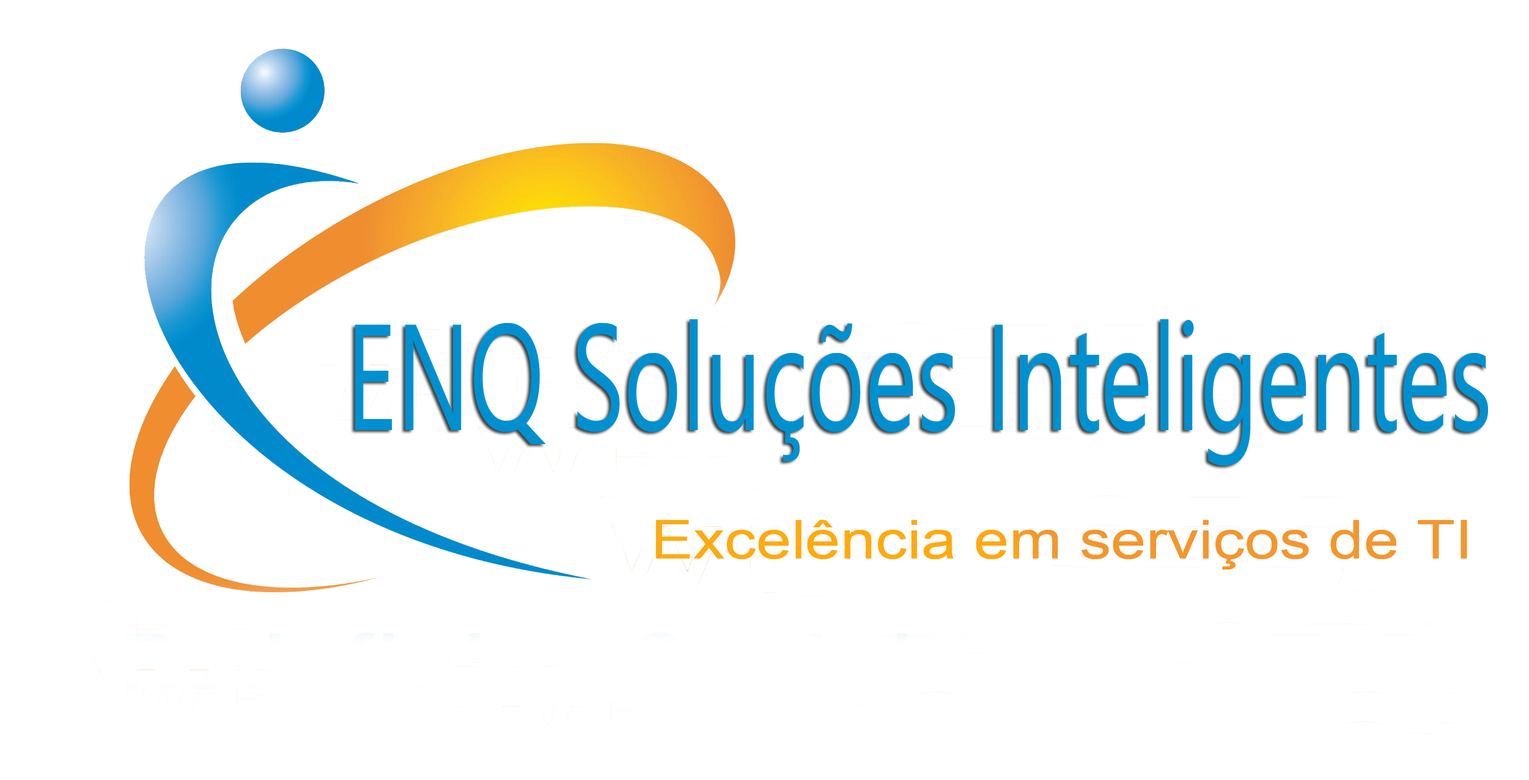
<style>
.page{position:relative;width:1529px;height:780px;background:#ffffff}
.page>*{position:absolute;margin:0}
.t1{font:149.8px "SegoeUI";color:#0090cf;scale:0.66 1}
.t2{font:53.4px "ArialMT";scale:1.18 1}
</style>
<div class="page">
<p class="t1" style="left:355px;top:319px;width:1133px;height:146px">ENQ Soluções Inteligentes</p>
<p class="t2" style="left:656px;top:520px;width:812px;height:49px">Excelência em serviços de TI</p>
</div>
